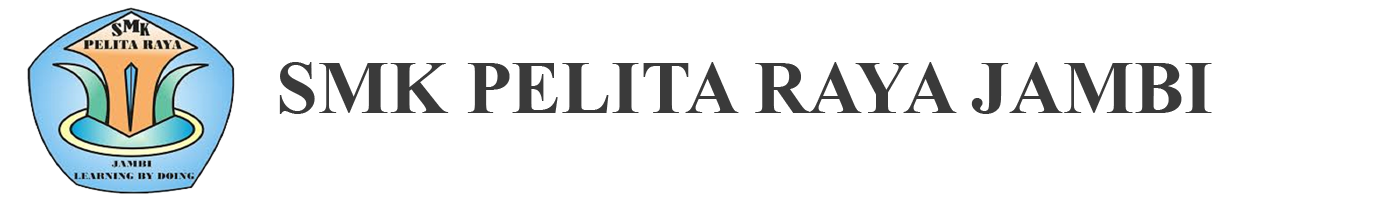
<style>
.page{position:relative;width:1380px;height:200px;background:#ffffff}
.page>*{position:absolute;margin:0}
.t1{font:75px "TimesNewRomanPS-BoldMT";color:#3a3a3a}
</style>
<div class="page">
<p class="t1" style="left:279px;top:62px;width:933px;height:52px">SMK PELITA RAYA JAMBI</p>
</div>
